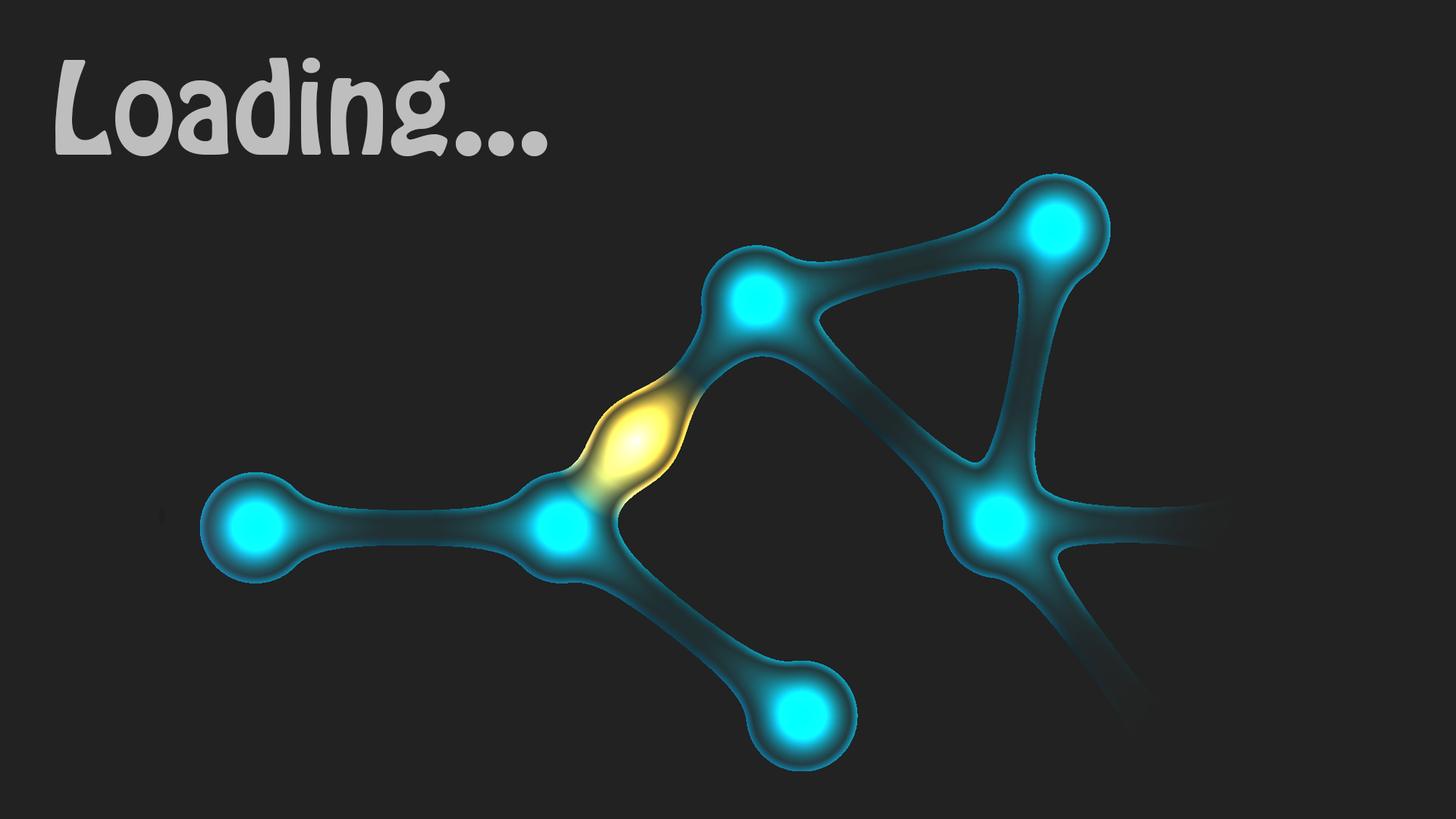
<style>
.page{position:relative;width:1456px;height:819px;background:#222222}
.page>*{position:absolute;margin:0}
.t1{font:113.7px "HoboStd";color:#bebebe}
</style>
<div class="page">
<p class="t1" style="left:55px;top:58px;width:493px;height:99px">Loading...</p>
</div>
